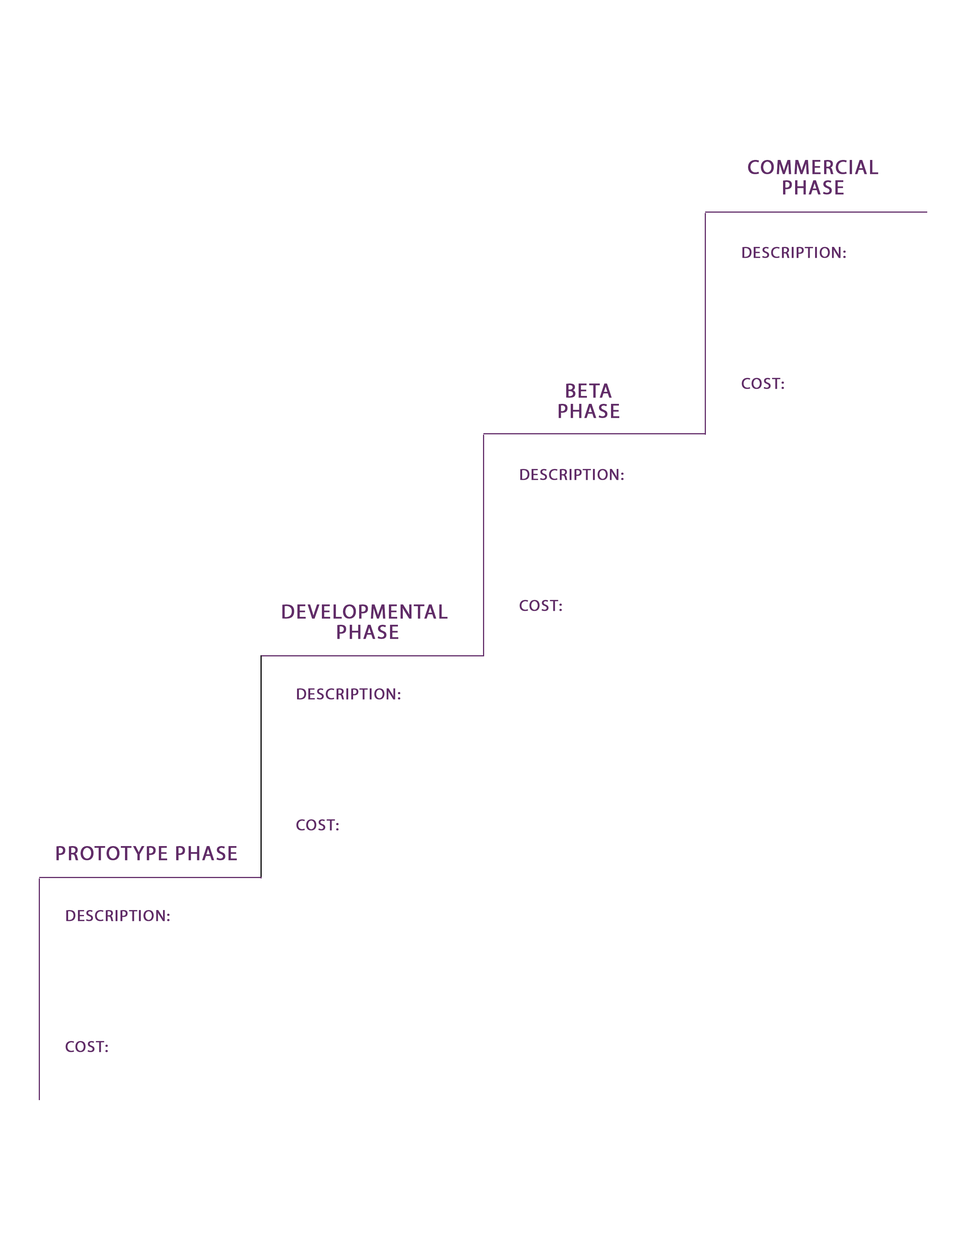
<style>
.page{position:relative;width:960px;height:1242px;background:#ffffff}
.page>*{position:absolute;margin:0}
.t1{font:20.2px/20.2px "MyriadPro-Regular";letter-spacing:0.05em;color:#612c68;font-weight:bold}
.t2{font:15.7px "MyriadPro-Regular";letter-spacing:0.05em;color:#612c68;font-weight:bold}
.t3{font:20.2px "MyriadPro-Regular";letter-spacing:0.05em;color:#612c68;font-weight:bold}
</style>
<div class="page">
<p class="t1" style="left:748px;top:160px;width:130px;height:35px;text-align:center">COMMERCIAL<br>PHASE</p>
<p class="t2" style="left:742px;top:247px;width:104px;height:11px">DESCRIPTION:</p>
<p class="t2" style="left:742px;top:378px;width:42px;height:11px">COST:</p>
<p class="t1" style="left:559px;top:384px;width:60px;height:34px;text-align:center">BETA<br>PHASE</p>
<p class="t2" style="left:520px;top:469px;width:104px;height:11px">DESCRIPTION:</p>
<p class="t1" style="left:282px;top:605px;width:166px;height:34px;text-align:center">DEVELOPMENTAL <br>PHASE</p>
<p class="t2" style="left:519px;top:600px;width:43px;height:11px">COST:</p>
<p class="t2" style="left:297px;top:688px;width:104px;height:12px">DESCRIPTION:</p>
<p class="t2" style="left:296px;top:819px;width:43px;height:12px">COST:</p>
<p class="t3" style="left:56px;top:846px;width:181px;height:15px">PROTOTYPE PHASE</p>
<p class="t2" style="left:66px;top:910px;width:104px;height:12px">DESCRIPTION:</p>
<p class="t2" style="left:65px;top:1041px;width:43px;height:12px">COST:</p>
</div>
